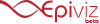
<style>
.page{position:relative;width:100px;height:24px;background:#ffffff}
.page>*{position:absolute;margin:0}
.t1{font:24px "BauhausITCbyBT-Medium";color:#c2202c;scale:1.05 1}
.t2{font:24px "BauhausITCbyBT-Light";color:#c2202c;scale:1.05 1}
.t3{font:7px "BauhausITCbyBT-Light";color:#c2202c}
</style>
<div class="page">
<p class="t1" style="left:41px;top:0px;width:57px;height:23px">Epi<span class="t2">viz</span></p>
<p class="t3" style="left:85px;top:18px;width:14px;height:5px">beta</p>
</div>
